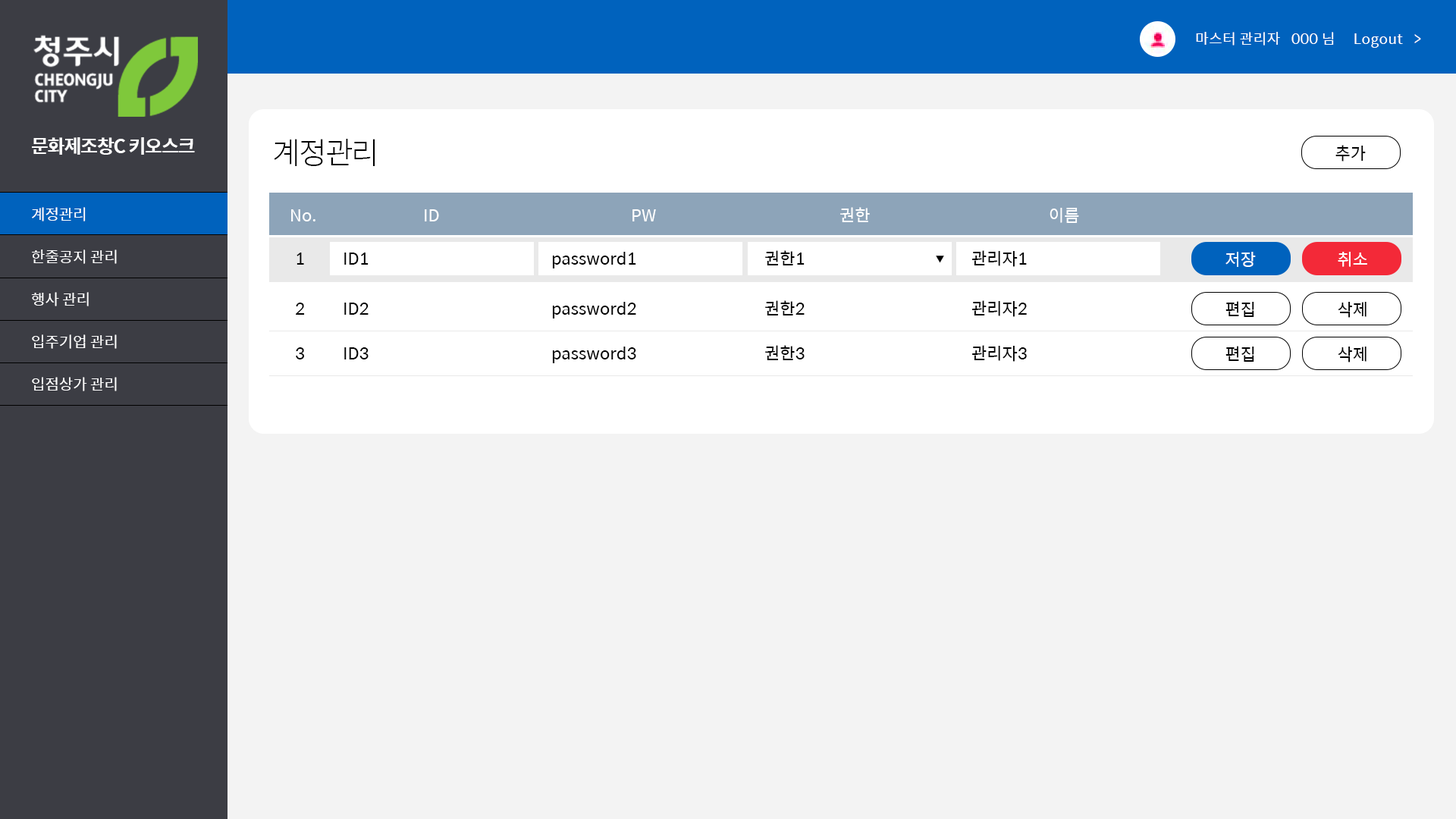
<style>
.page{position:relative;width:1456px;height:819px;background:#f3f3f3}
.page>*{position:absolute;margin:0}
.t1{font:14.4px "SpoqaHanSans-Regular";letter-spacing:0.025em;color:#ffffff}
.t2{font:19px "SpoqaHanSans-Bold";letter-spacing:-0.05em;color:#ffffff}
.t3{font:30.3px "SpoqaHanSans-Light";letter-spacing:-0.05em;color:#000000}
.t4{font:16.7px "SpoqaHanSans-Regular";color:#000000}
.t5{font:15.2px/42.5px "SpoqaHanSans-Regular";color:#ffffff}
.t6{font:16.7px "SpoqaHanSans-Regular";color:#ffffff}
.t7{font:8.5px "SpoqaHanSans-Regular";color:#000000}
</style>
<div class="page">
<p class="t1" style="left:1196px;top:32px;width:225px;height:16px">마스터 관리자   000 님     Logout   &gt;</p>
<p class="t1" style="left:1196px;top:32px;width:225px;height:16px">마스터 관리자   000 님     Logout   &gt;</p>
<p class="t2" style="left:32px;top:137px;width:163px;height:18px">문화제조창C 키오스크</p>
<p class="t3" style="left:274px;top:139px;width:101px;height:27px">계정관리</p>
<p class="t4" style="left:1335px;top:145px;width:31px;height:17px">추가</p>
<p class="t5" style="left:31px;top:207px;width:86px;height:184px">계정관리<br>한줄공지 관리<br>행사 관리<br>입주기업 관리<br>입점상가 관리</p>
<p class="t6" style="left:291px;top:209px;width:24px;height:12px">No.</p>
<p class="t6" style="left:425px;top:209px;width:14px;height:12px">ID</p>
<p class="t6" style="left:632px;top:209px;width:24px;height:12px">PW</p>
<p class="t6" style="left:840px;top:207px;width:30px;height:15px">권한</p>
<p class="t6" style="left:1050px;top:208px;width:29px;height:15px">이름</p>
<p class="t4" style="left:297px;top:253px;width:7px;height:12px">1</p>
<p class="t4" style="left:344px;top:253px;width:25px;height:12px">ID1</p>
<p class="t4" style="left:552px;top:252px;width:84px;height:16px">password1</p>
<p class="t4" style="left:765px;top:250px;width:40px;height:15px">권한1</p>
<p class="t7" style="left:936px;top:256px;width:8px;height:7px;rotate:90deg">▶</p>
<p class="t4" style="left:972px;top:250px;width:55px;height:17px">관리자1</p>
<p class="t6" style="left:1225px;top:252px;width:31px;height:15px">저장</p>
<p class="t6" style="left:1338px;top:252px;width:29px;height:15px">취소</p>
<p class="t4" style="left:296px;top:303px;width:9px;height:12px">2</p>
<p class="t4" style="left:344px;top:303px;width:25px;height:12px">ID2</p>
<p class="t4" style="left:552px;top:302px;width:84px;height:16px">password2</p>
<p class="t4" style="left:765px;top:300px;width:40px;height:15px">권한2</p>
<p class="t4" style="left:972px;top:300px;width:55px;height:17px">관리자2</p>
<p class="t4" style="left:1225px;top:301px;width:29px;height:16px">편집</p>
<p class="t4" style="left:1338px;top:302px;width:28px;height:16px">삭제</p>
<p class="t4" style="left:296px;top:347px;width:9px;height:12px">3</p>
<p class="t4" style="left:344px;top:347px;width:25px;height:12px">ID3</p>
<p class="t4" style="left:552px;top:347px;width:84px;height:16px">password3</p>
<p class="t4" style="left:765px;top:345px;width:40px;height:15px">권한3</p>
<p class="t4" style="left:972px;top:345px;width:55px;height:17px">관리자3</p>
<p class="t4" style="left:1225px;top:346px;width:29px;height:16px">편집</p>
<p class="t4" style="left:1338px;top:347px;width:28px;height:15px">삭제</p>
</div>
